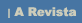
<style>
.page{position:relative;width:82px;height:23px;background:#4775a3}
.page>*{position:absolute;margin:0}
.t1{font:12px "Arial-Black";color:#cdccba}
.t2{font:10px "Arial-Black";color:#cdccba}
</style>
<div class="page">
<p class="t1" style="left:8px;top:7px;width:69px;height:11px"><span class="t2">  |</span> A Revista</p>
</div>
